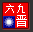
<style>
.page{position:relative;width:33px;height:32px;background:#f20000}
.page>*{position:absolute;margin:0}
.t1{font:10.4px "SimSun";color:#ffffff}
.t2{font:11.7px "SimSun";color:#ffffff}
</style>
<div class="page">
<p class="t1" style="left:5px;top:4px;width:20px;height:9px">六九</p>
<p class="t2" style="left:16px;top:15px;width:11px;height:12px">晋</p>
</div>
